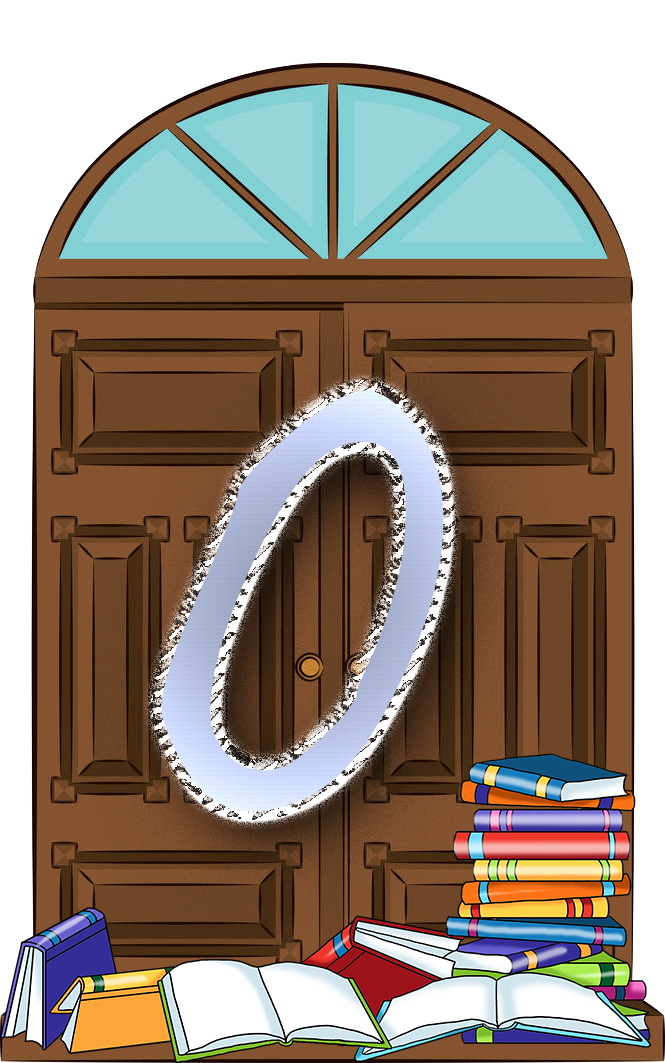
<style>
.page{position:relative;width:665px;height:1063px;background:#ffffff}
.page>*{position:absolute;margin:0}
.t1{font:666.7px "Purisa"}
</style>
<div class="page">
<p class="t1" style="left:161px;top:390px;width:283px;height:422px">0</p>
</div>
